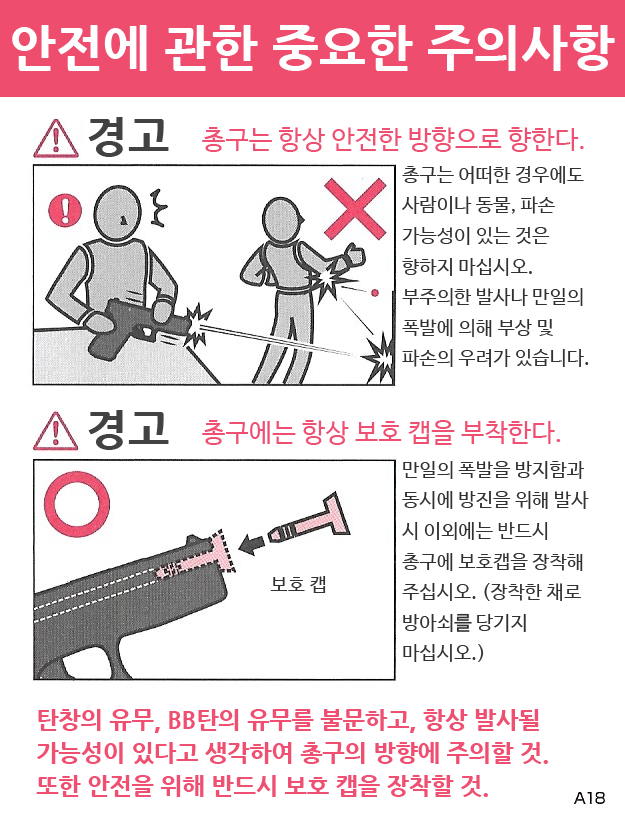
<style>
.page{position:relative;width:625px;height:828px;background:#ffffff}
.page>*{position:absolute;margin:0}
.t1{font:50px "NanumGothicExtraBold";color:#ffffff}
.t2{font:44.4px "NanumGothicExtraBold";color:#424242}
.t3{font:26.4px "NanumBarunGothic";color:#ef4f71}
.t4{font:19.4px/30.6px "NanumBarunGothic";color:#313131}
.t5{font:19.4px "NanumBarunGothic";color:#313131}
.t6{font:23.6px/33.3px "NanumGothicExtraBold";color:#ef4f71}
</style>
<div class="page">
<p class="t1" style="left:12px;top:25px;width:603px;height:46px">안전에 관한 중요한 주의사항</p>
<p class="t2" style="left:88px;top:117px;width:81px;height:40px">경고</p>
<p class="t3" style="left:202px;top:127px;width:382px;height:25px">총구는 항상 안전한 방향으로 향한다.</p>
<p class="t4" style="left:402px;top:166px;width:187px;height:201px">총구는 어떠한 경우에도 사람이나 동물, 파손 가능성이 있는 것은 향하지 마십시오. 부주의한 발사나 만일의 폭발에 의해 부상 및 파손의 우려가 있습니다.</p>
<p class="t2" style="left:88px;top:410px;width:81px;height:40px">경고</p>
<p class="t3" style="left:202px;top:420px;width:359px;height:25px">총구에는 항상 보호 캡을 부착한다.</p>
<p class="t4" style="left:402px;top:461px;width:187px;height:201px">만일의 폭발을 방지함과 동시에 방진을 위해 발사 시 이외에는 반드시 총구에 보호캡을 장착해 주십시오. (장착한 채로 방아쇠를 당기지 마십시오.)</p>
<p class="t5" style="left:270px;top:576px;width:56px;height:17px">보호 캡</p>
<p class="t6" style="left:36px;top:709px;width:512px;height:88px">탄창의 유무, BB탄의 유무를 불문하고, 항상 발사될 가능성이 있다고 생각하여 총구의 방향에 주의할 것. 또한 안전을 위해 반드시 보호 캡을 장착할 것.</p>
</div>
